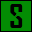
<style>
.page{position:relative;width:32px;height:32px;background:#038c03}
.page>*{position:absolute;margin:0}
.t1{font:32px "AgencyFB-Bold";letter-spacing:0.04em;color:#000000}
</style>
<div class="page">
<p class="t1" style="left:10px;top:4px;width:13px;height:24px">S</p>
</div>
